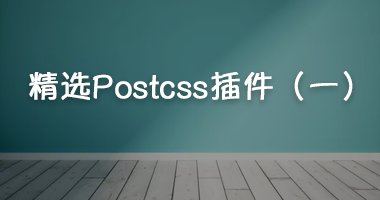
<style>
.page{position:relative;width:380px;height:200px}
.page>*{position:absolute;margin:0}
.t1{font:32px "YuppySC-Regular";color:#ffffff;font-weight:bold}
</style>
<div class="page">
<p class="t1" style="left:29px;top:71px;width:324px;height:30px">精选Postcss插件（一）</p>
</div>
